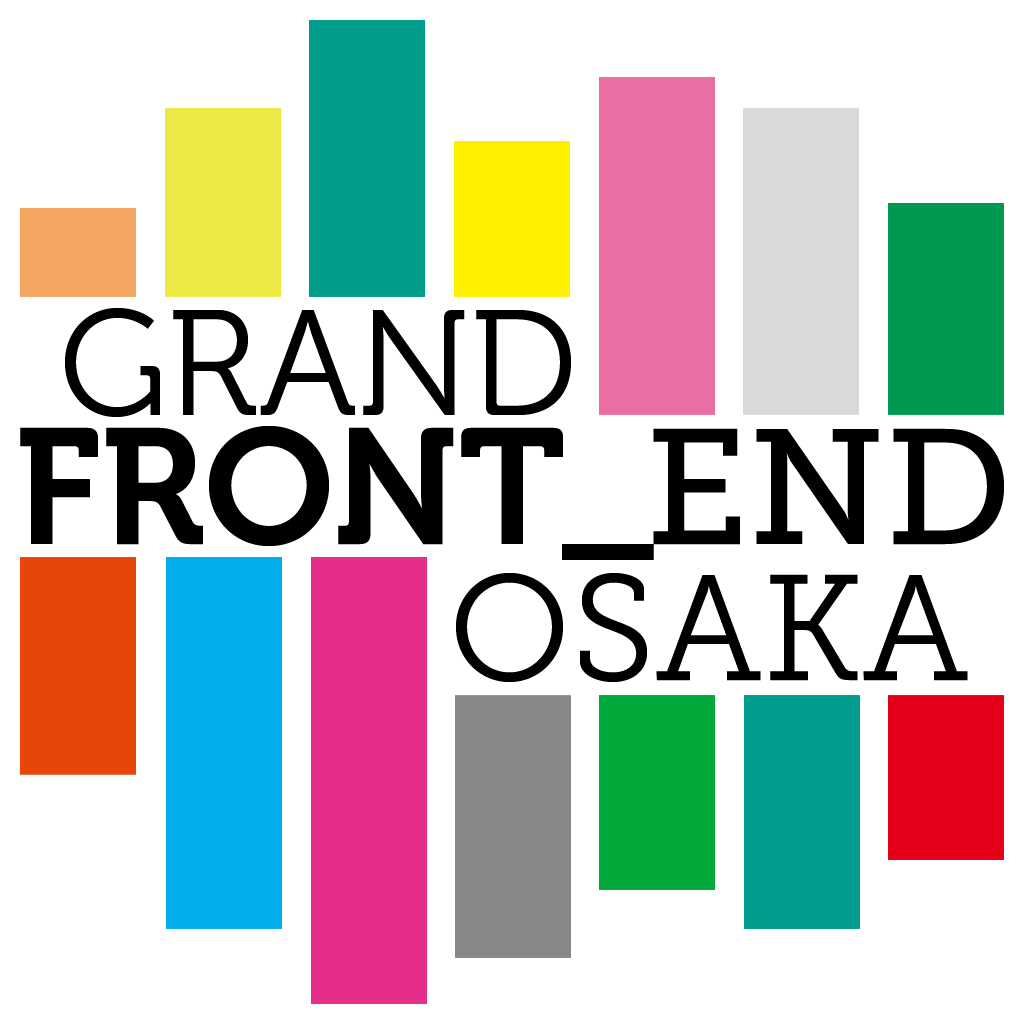
<style>
.page{position:relative;width:1024px;height:1024px;background:#ffffff}
.page>*{position:absolute;margin:0}
.t1{font:149.3px "Museo-300";color:#000000;text-transform:uppercase}
.t2{font:163.4px "Museo-700";color:#000000;text-transform:uppercase}
.t3{font:163.4px "Museo-700";letter-spacing:-0.03em;color:#000000;text-transform:uppercase}
.t4{font:163.4px "MuseoSlab-500";color:#000000;text-transform:uppercase}
.t5{font:149.3px "MuseoSlab-300";color:#000000;text-transform:uppercase}
</style>
<div class="page">
<p class="t1" style="left:65px;top:308px;width:506px;height:109px">GRAND</p>
<p class="t2" style="left:20px;top:426px;width:984px;height:134px">FRON<span class="t3">T_</span><span class="t4">END</span></p>
<p class="t5" style="left:456px;top:573px;width:512px;height:109px">OSAKA</p>
</div>
